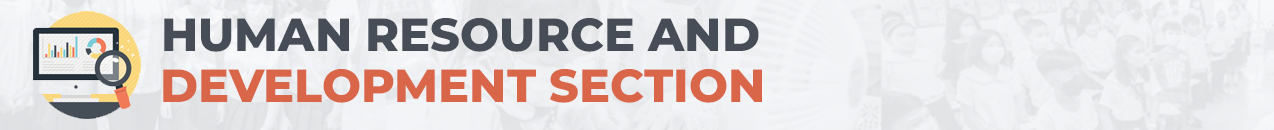
<style>
.page{position:relative;width:1274px;height:130px}
.page>*{position:absolute;margin:0}
.t1{font:11.1px/41.6px "Montserrat-ExtraBold";color:#464d57}
.t2{font:11.1px/41.6px "Montserrat-ExtraBold";color:#da664a}
</style>
<div class="page">
<p class="t1" style="left:164px;top:18px;width:595px;height:34px">HUMAN RESOURCE AND</p>
<p class="t2" style="left:163px;top:69px;width:599px;height:34px">DEVELOPMENT SECTION</p>
</div>
